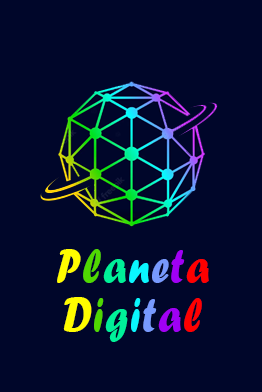
<style>
.page{position:relative;width:262px;height:392px;background:#00062a}
.page>*{position:absolute;margin:0}
.t1{font:49.5px/48.6px "ForteMT";letter-spacing:0.04em;color:#fffc00;scale:0.84 1}
.t2{font:49.5px/48.6px "ForteMT";letter-spacing:0.04em;color:#50d801;scale:0.84 1}
.t3{font:49.5px/48.6px "ForteMT";letter-spacing:0.04em;color:#00f199;scale:0.84 1}
.t4{font:49.5px/48.6px "ForteMT";letter-spacing:0.04em;color:#0af6ff;scale:0.84 1}
.t5{font:49.5px/48.6px "ForteMT";letter-spacing:0.04em;color:#7799fe;scale:0.84 1}
.t6{font:49.5px/48.6px "ForteMT";letter-spacing:0.04em;color:#a000f5;scale:0.84 1}
.t7{font:49.5px/48.6px "ForteMT";letter-spacing:0.04em;color:#ff0000;scale:0.84 1}
</style>
<div class="page">
<p class="t1" style="left:57px;top:249px;width:152px;height:93px;text-align:center">P<span class="t2">l</span><span class="t3">a</span><span class="t4">n</span><span class="t5">e</span><span class="t6">t</span><span class="t7">a<br></span>D<span class="t2">i</span><span class="t3">g</span><span class="t4">i</span><span class="t5">t</span><span class="t6">a</span><span class="t7">l</span></p>
</div>
